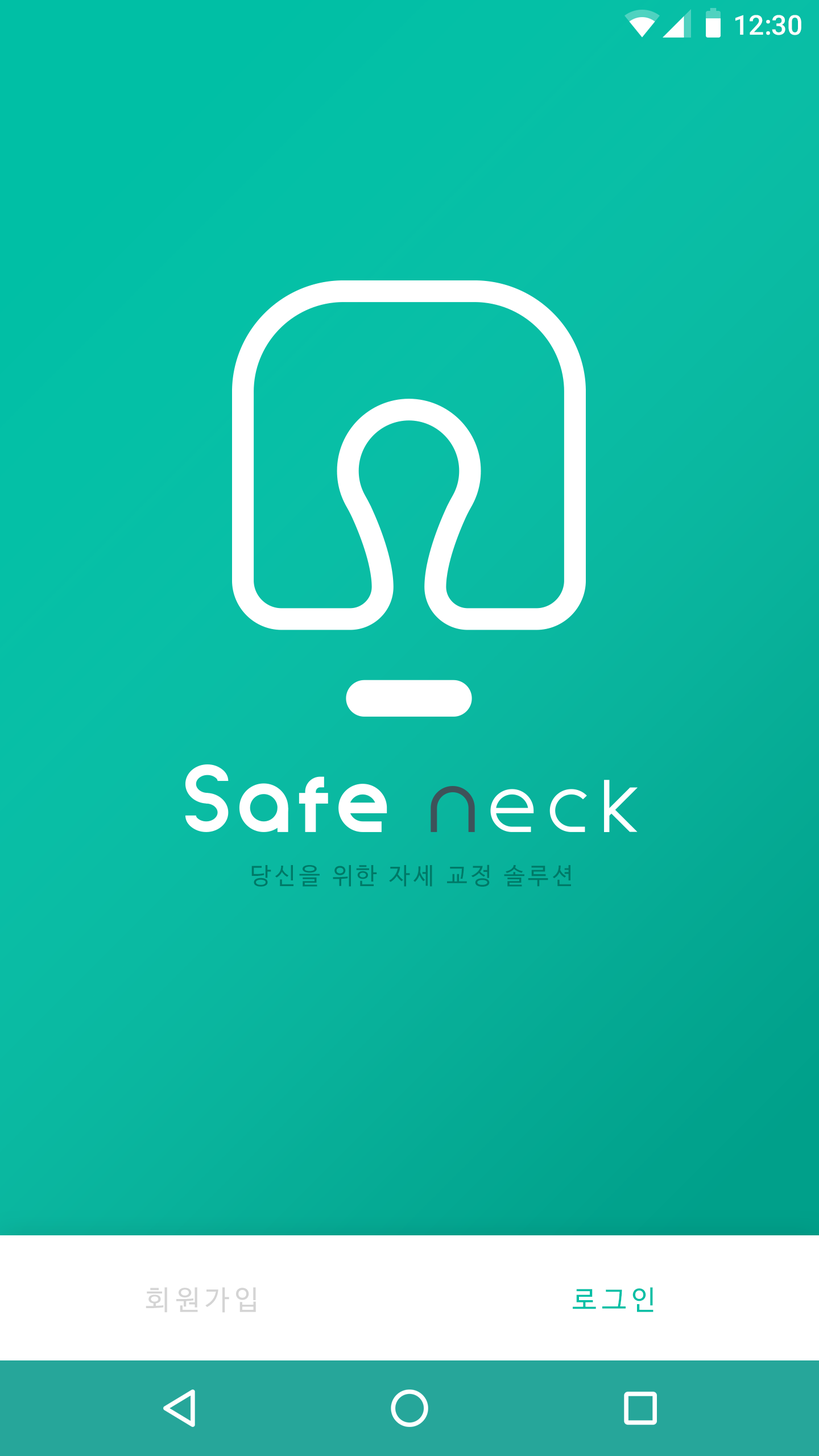
<style>
.page{position:relative;width:819px;height:1456px}
.page>*{position:absolute;margin:0}
.t1{font:27.3px "Roboto-Medium";color:#ffffff}
.t2{font:23.2px "NanumBarunGothic";letter-spacing:0.15em;color:#007967}
.t3{font:27.3px "NanumBarunGothic";letter-spacing:0.2em;color:#d4d4d4}
.t4{font:27.3px "NanumBarunGothic";letter-spacing:0.2em;color:#00bfa5}
</style>
<div class="page">
<p class="t1" style="left:735px;top:15px;width:66px;height:20px">12:30</p>
<p class="t2" style="left:251px;top:864px;width:320px;height:23px">당신을 위한 자세 교정 솔루션</p>
<p class="t3" style="left:146px;top:1287px;width:110px;height:26px">회원가입</p>
<p class="t4" style="left:573px;top:1287px;width:80px;height:25px">로그인</p>
</div>
